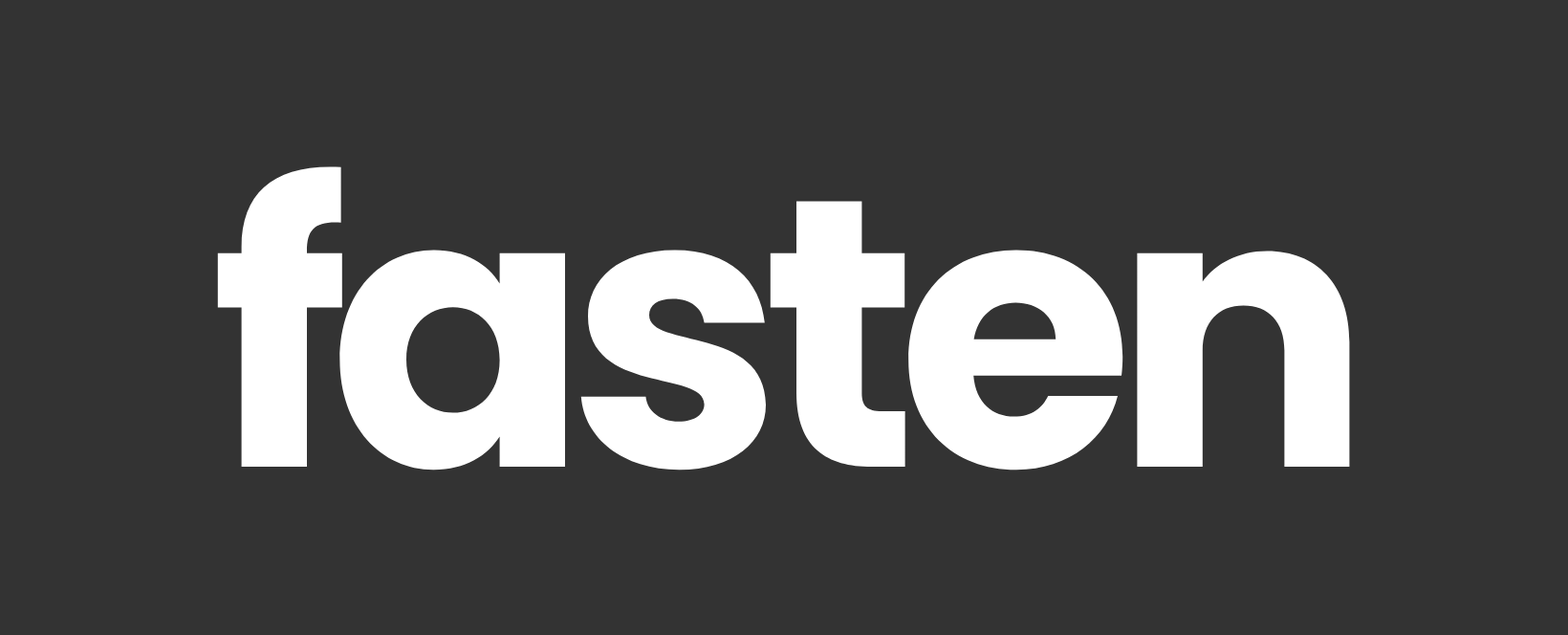
<style>
.page{position:relative;width:1568px;height:635px;background:#333333}
.page>*{position:absolute;margin:0}
.t1{font:382.4px "Poppins-Bold";letter-spacing:-0.052em;color:#ffffff}
</style>
<div class="page">
<p class="t1" style="left:217px;top:163px;width:1133px;height:307px">fasten</p>
</div>
